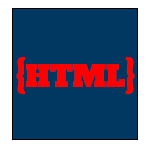
<style>
.page{position:relative;width:150px;height:150px;background:#003862}
.page>*{position:absolute;margin:0}
.t1{font:29.2px "AlfaSlabOne-Regular";color:#ff0000}
.t2{font:33.3px "AlfaSlabOne-Regular";color:#ff0000}
</style>
<div class="page">
<p class="t1" style="left:16px;top:57px;width:119px;height:37px"><span class="t2">{</span>HTML<span class="t2">}</span></p>
</div>
